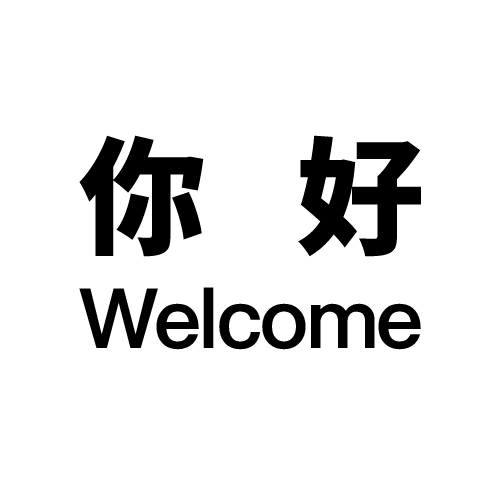
<style>
.page{position:relative;width:500px;height:500px;background:#ffffff}
.page>*{position:absolute;margin:0}
.t1{font:127px "NotoSansSC-Black";letter-spacing:0.72em;color:#000000}
.t2{font:83.2px "PingFangSC-Semibold";letter-spacing:-0.04em;color:#000000}
</style>
<div class="page">
<p class="t1" style="left:79px;top:135px;width:342px;height:122px">你好</p>
<p class="t2" style="left:79px;top:287px;width:342px;height:63px">Welcome</p>
</div>
